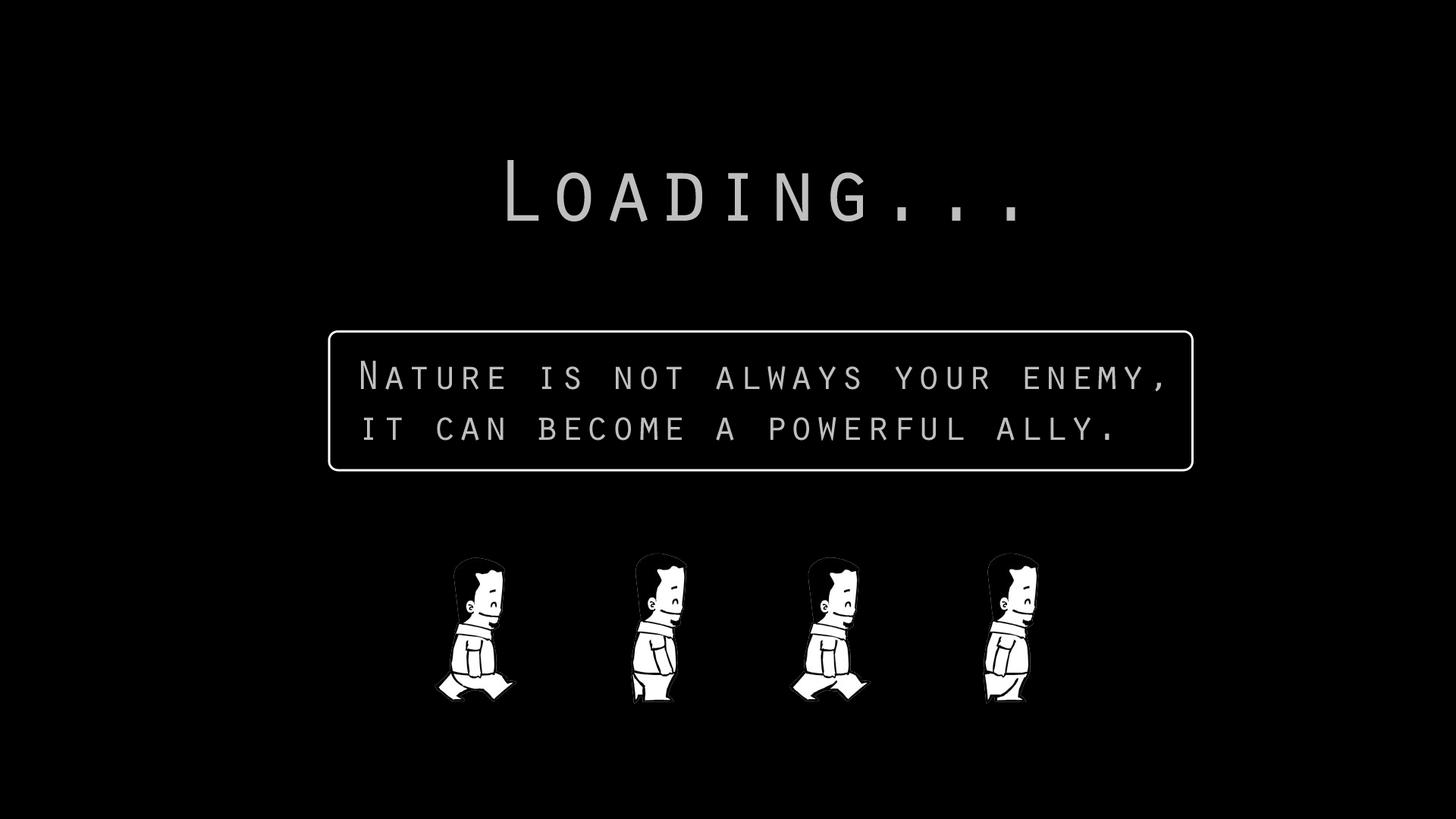
<style>
.page{position:relative;width:1456px;height:819px;background:#000000}
.page>*{position:absolute;margin:0}
.t1{font:91px "OratorStd";color:#bfbfbf}
.t2{font:42.5px "OratorStd";color:#bfbfbf}
</style>
<div class="page">
<p class="t1" style="left:507px;top:160px;width:508px;height:62px">Loading...</p>
<p class="t2" style="left:361px;top:360px;width:800px;height:81px">Nature is not always your enemy, <br>it can become a powerful ally.</p>
</div>
